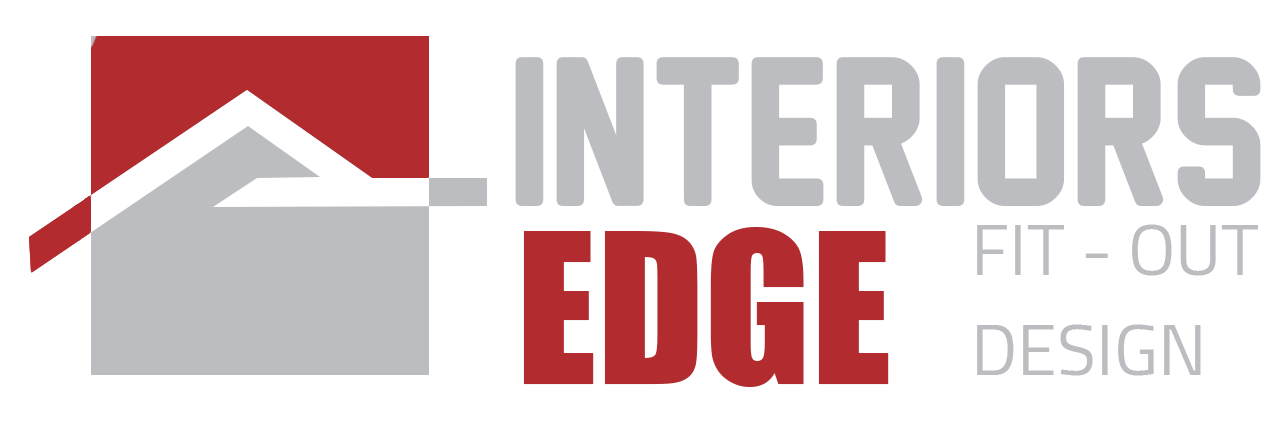
<style>
.page{position:relative;width:1280px;height:435px;background:#ffffff}
.page>*{position:absolute;margin:0}
.t1{font:194px "NewAthleticM54";color:#bcbdc1}
.t2{font:194px "Impact";color:#b22b2f}
.t3{font:72px "Cairo-Regular";color:#bcbdc1}
</style>
<div class="page">
<p class="t1" style="left:515px;top:57px;width:746px;height:149px">INTERIORS</p>
<p class="t2" style="left:523px;top:227px;width:366px;height:160px">EDGE</p>
<p class="t3" style="left:977px;top:224px;width:281px;height:52px">FIT - OUT</p>
<p class="t3" style="left:977px;top:324px;width:224px;height:52px">DESIGN</p>
</div>
